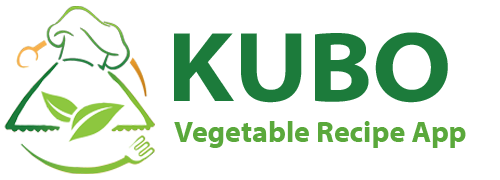
<style>
.page{position:relative;width:500px;height:180px;background:#ffffff}
.page>*{position:absolute;margin:0}
.t1{font:100px "MyriadPro-BoldSemiExt";color:#1c7b3b}
.t2{font:30px "MyriadPro-Bold";color:#5aa83b}
</style>
<div class="page">
<p class="t1" style="left:174px;top:32px;width:274px;height:71px">KUBO</p>
<p class="t2" style="left:174px;top:121px;width:292px;height:27px">Vegetable Recipe App</p>
</div>
